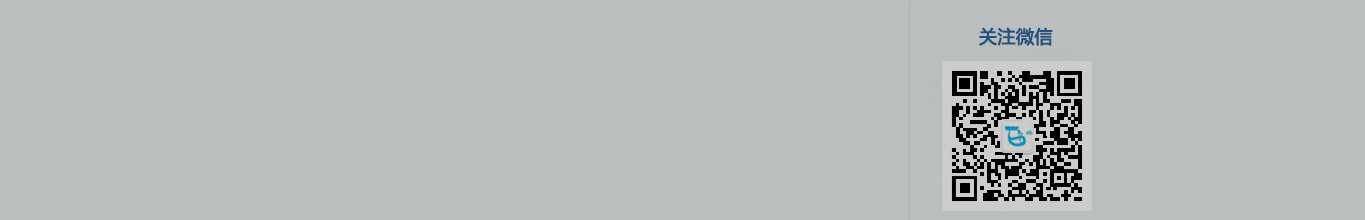
<style>
.page{position:relative;width:1365px;height:220px;background:#babebf}
.page>*{position:absolute;margin:0}
.t1{font:18px "MicrosoftYaHei";color:#23527c;font-weight:bold}
</style>
<div class="page">
<p class="t1" style="left:979px;top:27px;width:74px;height:19px">关注微信</p>
</div>
